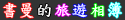
<style>
.page{position:relative;width:125px;height:20px;background:#333333}
.page>*{position:absolute;margin:0}
.t1{font:16px "DFKaiShu-SB-Estd-BF";letter-spacing:0.075em;color:#ffffff}
</style>
<div class="page">
<p class="t1" style="left:3px;top:2px;width:14px;height:16px">書</p>
<p class="t1" style="left:20px;top:3px;width:14px;height:15px">曼</p>
<p class="t1" style="left:38px;top:4px;width:13px;height:13px">的</p>
<p class="t1" style="left:55px;top:4px;width:16px;height:12px">旅</p>
<p class="t1" style="left:72px;top:3px;width:15px;height:15px">遊</p>
<p class="t1" style="left:91px;top:4px;width:13px;height:13px">相</p>
<p class="t1" style="left:108px;top:2px;width:14px;height:16px">簿</p>
</div>
